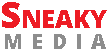
<style>
.page{position:relative;width:110px;height:55px;background:#ffffff}
.page>*{position:absolute;margin:0}
.t1{font:36px "OpenSans-Extrabold";letter-spacing:-0.01em;color:#ed1c24;font-variant:small-caps}
.t2{font:21px "OpenSans-Extrabold";letter-spacing:0.4em;color:#8d8d8d;text-transform:uppercase}
</style>
<div class="page">
<p class="t1" style="left:2px;top:2px;width:105px;height:26px">Sneaky</p>
<p class="t2" style="left:5px;top:34px;width:101px;height:15px">media</p>
</div>
